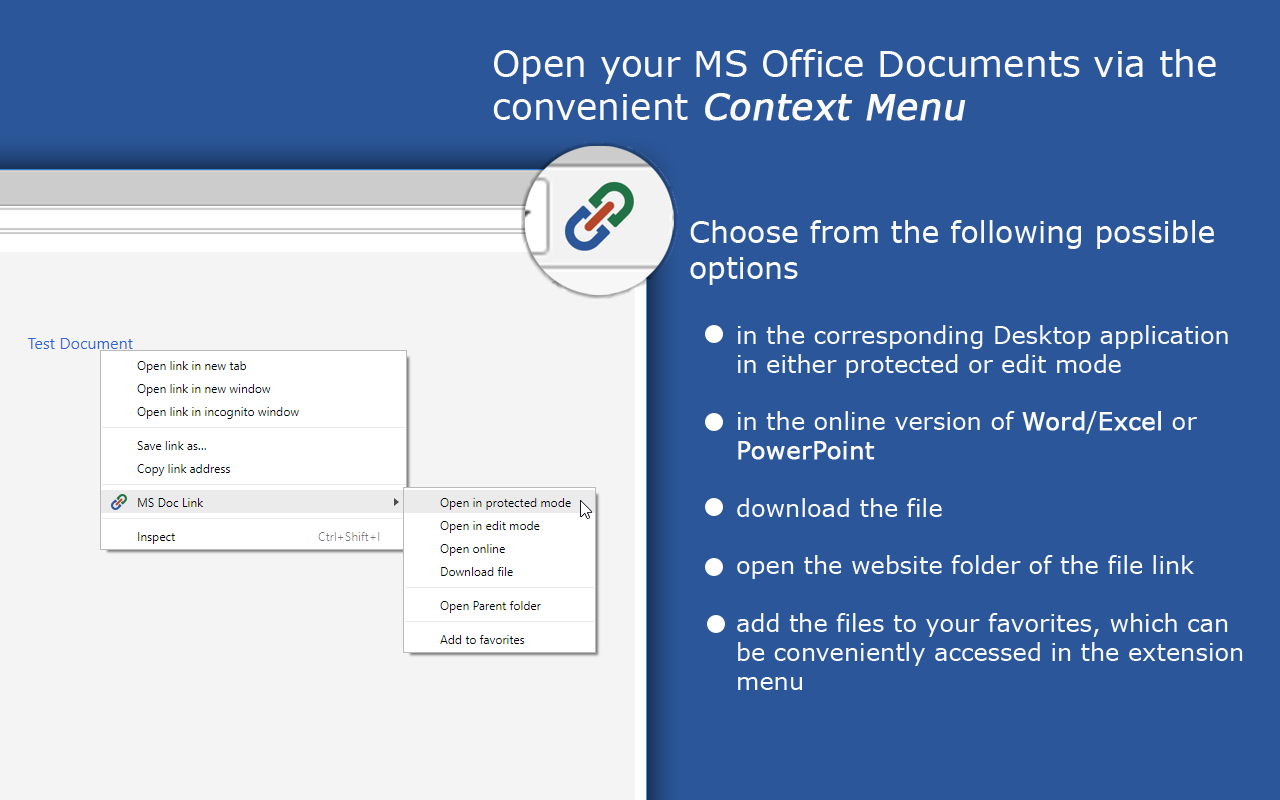
<style>
.page{position:relative;width:1280px;height:800px;background:#2b579a}
.page>*{position:absolute;margin:0}
.t1{font:36px "Verdana";color:#fafafa}
.t2{font:36px "Verdana";color:#fafafa;font-weight:bold;font-style:italic}
.t3{font:30px "Verdana";color:#fafafa}
.t4{font:24px "Verdana";color:#fafafa}
.t5{font:24px "Verdana";color:#fafafa;font-weight:bold}
</style>
<div class="page">
<p class="t1" style="left:493px;top:49px;width:723px;height:72px">Open your MS Office Documents via the<br>convenient <span class="t2">Context Menu</span></p>
<p class="t3" style="left:690px;top:220px;width:524px;height:65px">Choose from the following possible <br>options</p>
<p class="t4" style="left:737px;top:325px;width:506px;height:365px">in the corresponding Desktop application<br>in either protected or edit mode<br><br>in the online version of <span class="t5">Word</span>/<span class="t5">Excel</span> or<br><span class="t5">PowerPoint<br></span><br>download the file<br><br>open the website folder of the file link<br><br>add the files to your favorites, which can<br>be conveniently accessed in the extension<br>menu</p>
</div>
